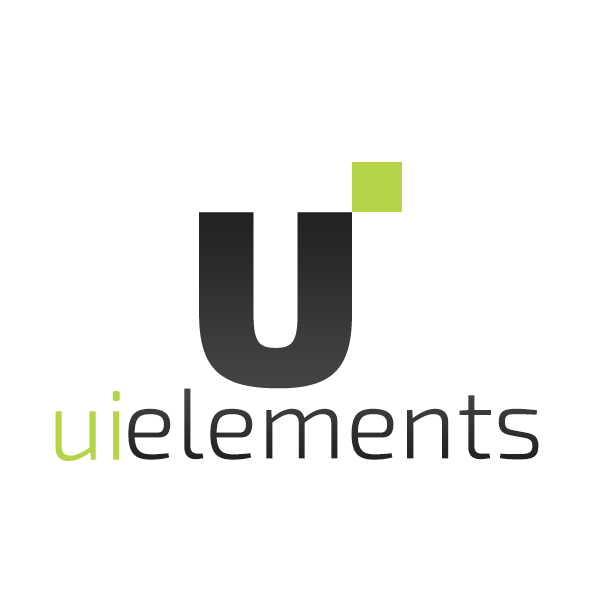
<style>
.page{position:relative;width:600px;height:600px;background:#ffffff}
.page>*{position:absolute;margin:0}
.t1{font:100px "Exo2.0-Light";color:#222222}
.t2{font:100px "Exo2.0-Light";color:#b5d447}
</style>
<div class="page">
<p class="t1" style="left:128px;top:388px;width:411px;height:72px">elements</p>
<p class="t2" style="left:55px;top:391px;width:65px;height:70px">ui</p>
</div>
